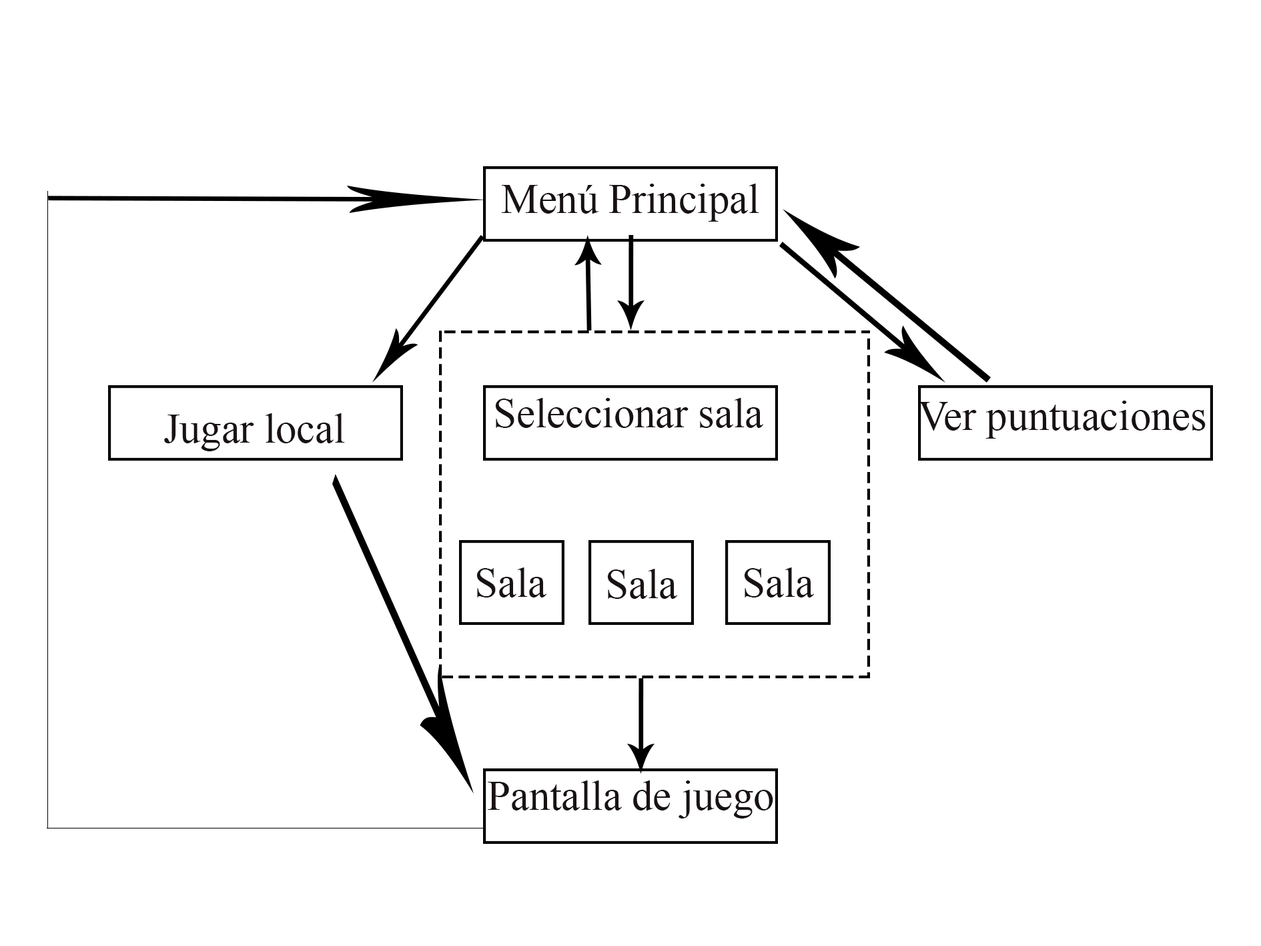
<style>
.page{position:relative;width:1261px;height:946px;background:#ffffff}
.page>*{position:absolute;margin:0}
.t1{font:41.7px "TimesNewRomanPSMT";color:#181212}
</style>
<div class="page">
<p class="t1" style="left:502px;top:183px;width:257px;height:39px">Menú Principal</p>
<p class="t1" style="left:495px;top:398px;width:268px;height:30px">Seleccionar sala</p>
<p class="t1" style="left:918px;top:400px;width:288px;height:38px">Ver puntuaciones</p>
<p class="t1" style="left:164px;top:413px;width:181px;height:38px">Jugar local</p>
<p class="t1" style="left:476px;top:567px;width:70px;height:30px">Sala</p>
<p class="t1" style="left:607px;top:569px;width:70px;height:30px">Sala</p>
<p class="t1" style="left:744px;top:567px;width:70px;height:30px">Sala</p>
<p class="t1" style="left:488px;top:780px;width:285px;height:38px">Pantalla de juego</p>
</div>
